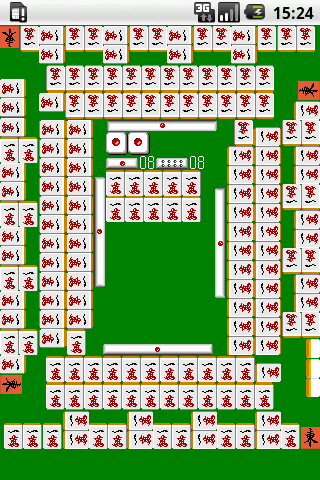
<style>
.page{position:relative;width:320px;height:480px;background:#e9e9e9}
.page>*{position:absolute;margin:0}
.t1{font:12px "System";color:#ffffff}
</style>
<div class="page">
<p class="t1" style="left:140px;top:156px;width:14px;height:13px">08</p>
<p class="t1" style="left:190px;top:156px;width:14px;height:13px">08</p>
</div>
